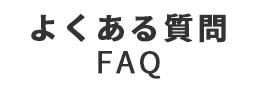
<style>
.page{position:relative;width:260px;height:89px;background:#ffffff}
.page>*{position:absolute;margin:0}
.t1{font:30px "SourceHanSansJP-Bold";letter-spacing:0.1em;color:#333333;font-weight:bold}
.t2{font:30px "SourceHanSansJP-Regular";letter-spacing:0.1em;color:#333333;font-weight:bold}
</style>
<div class="page">
<p class="t1" style="left:31px;top:13px;width:195px;height:30px">よくある質問</p>
<p class="t2" style="left:98px;top:51px;width:63px;height:28px">FAQ</p>
</div>
